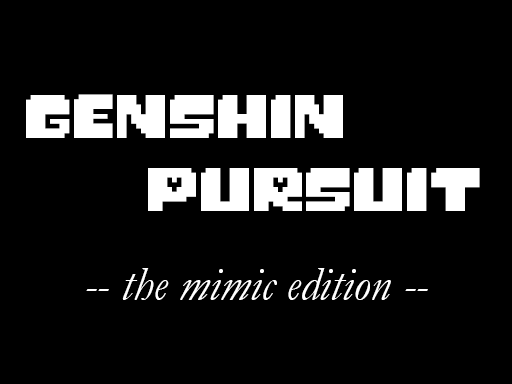
<style>
.page{position:relative;width:512px;height:384px;background:#000000}
.page>*{position:absolute;margin:0}
.t1{font:48px "MonsterFriendFore";color:#ffffff}
.t2{font:48px "Garamond-Italic";color:#ffffff}
</style>
<div class="page">
<p class="t1" style="left:26px;top:94px;width:317px;height:44px">GENSHIN</p>
<p class="t1" style="left:148px;top:168px;width:332px;height:43px">PURSUIT</p>
<p class="t2" style="left:86px;top:268px;width:342px;height:32px">-- the mimic edition --</p>
</div>
